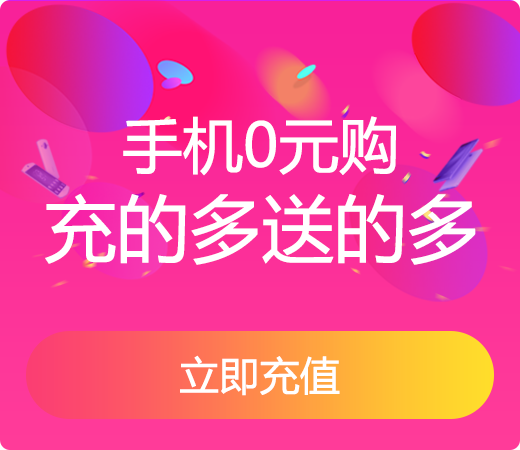
<style>
.page{position:relative;width:520px;height:450px}
.page>*{position:absolute;margin:0}
.t1{font:60px "MicrosoftYaHei";letter-spacing:-0.02em;color:#ffffff;font-weight:bold}
.t2{font:72px "MicrosoftYaHei";letter-spacing:-0.02em;color:#ffffff;font-weight:bold}
.t3{font:40px "MicrosoftYaHei";letter-spacing:-0.02em;color:#ffffff;font-weight:bold}
</style>
<div class="page">
<p class="t1" style="left:123px;top:116px;width:273px;height:60px">手机0元购</p>
<p class="t2" style="left:45px;top:193px;width:431px;height:72px">充的多送的多</p>
<p class="t3" style="left:180px;top:355px;width:160px;height:41px">立即充值</p>
</div>
